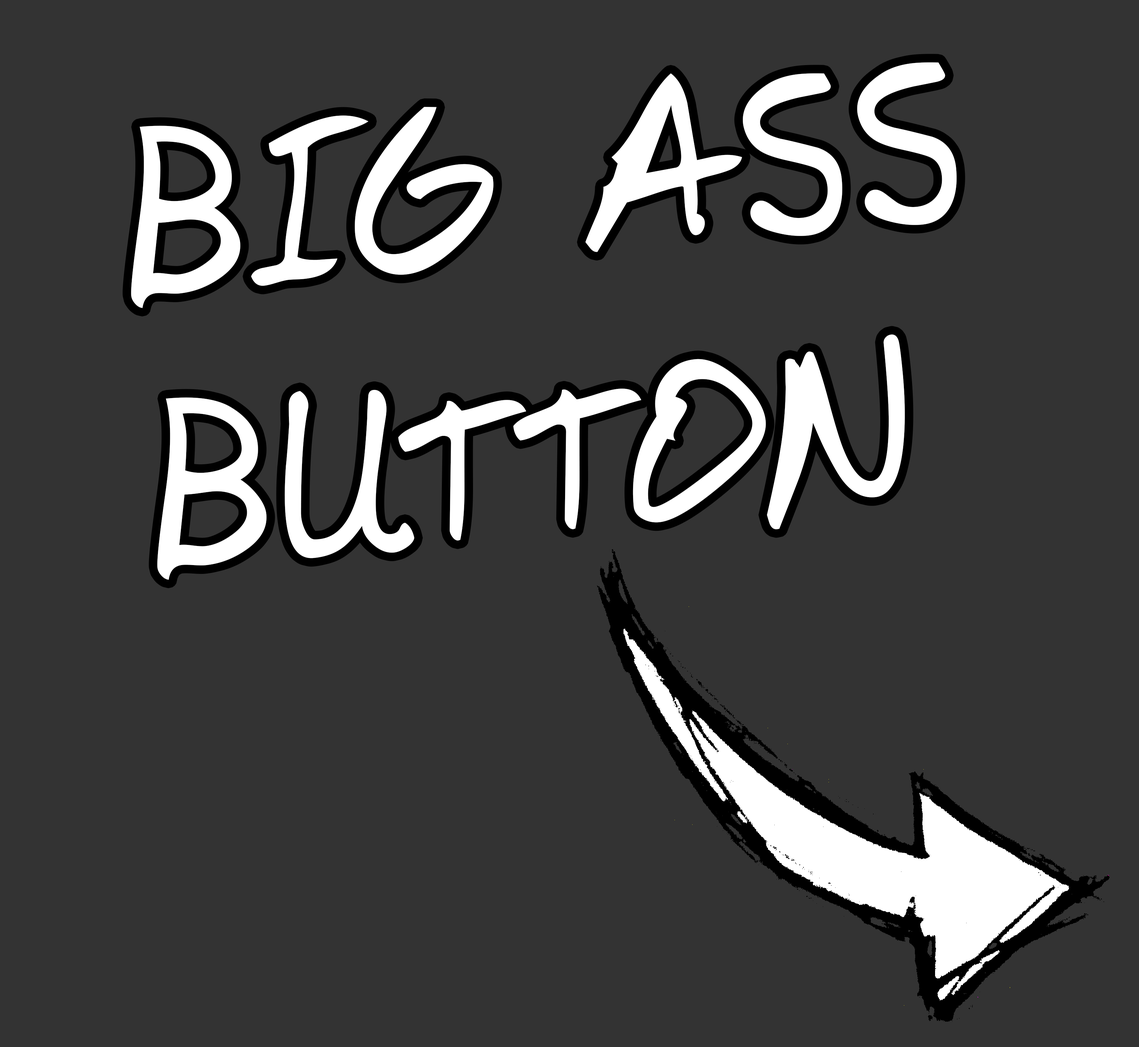
<style>
.page{position:relative;width:1139px;height:1047px;background:#333333}
.page>*{position:absolute;margin:0}
.t1{font:227.7px "DomesticManners";letter-spacing:0.04em;color:#ffffff}
.t2{font:227.7px "DomesticManners";color:#ffffff}
</style>
<div class="page">
<p class="t1" style="left:131px;top:62px;width:825px;height:518px;rotate:-5deg">BIG ASS<br><span class="t2">BUTTON</span></p>
</div>
